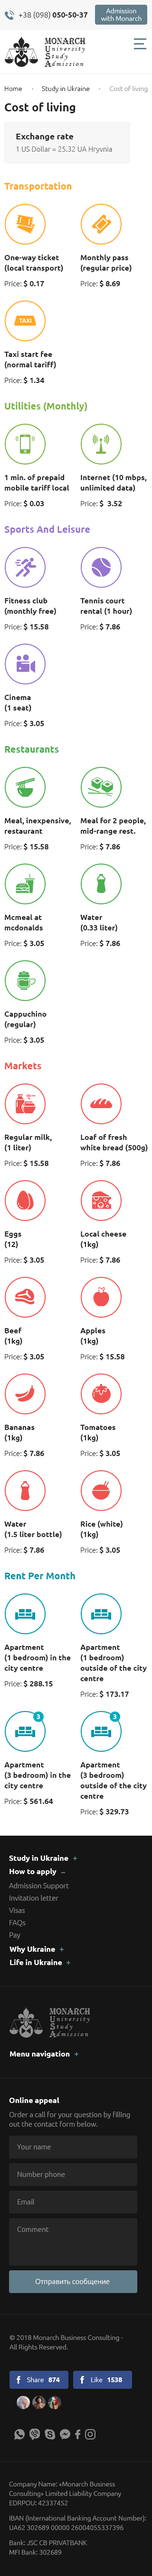
<style>
.page{position:relative;width:152px;height:2576px;background:#ffffff}
.page>*{position:absolute;margin:0}
.t1{font:7.6px "Ubuntu-Light";color:#262028}
.t2{font:7.6px "Ubuntu-Bold";color:#262028}
.t3{font:6.6px/7.6px "Ubuntu-Light";color:#ffffff}
.t4{font:8.8px "Algerian";color:#252525}
.t5{font:7.1px "MonotypeCorsiva";letter-spacing:0.19em;color:#252525}
.t6{font:6.6px "Ubuntu-Light";color:#202020}
.t7{font:6.6px "Ubuntu-Light";color:#909090}
.t8{font:11.4px "Ubuntu-Bold";color:#252525}
.t9{font:7.1px/12.3px "Ubuntu-Light";color:#606060}
.t10{font:8.5px/12.3px "Ubuntu-Bold";color:#252525}
.t11{font:9.5px "Ubuntu-Bold";color:#ffa726}
.t12{font:7.6px/10.4px "Ubuntu-Bold";color:#252525}
.t13{font:7.1px "Ubuntu-Light";color:#252525}
.t14{font:7.6px "Ubuntu-Bold";color:#252525}
.t15{font:9.5px "Ubuntu-Bold";color:#7cb342}
.t16{font:9.5px "Ubuntu-Bold";color:#9575cd}
.t17{font:9.5px "Ubuntu-Bold";color:#4caf50}
.t18{font:9.5px "Ubuntu-Bold";color:#ef5350}
.t19{font:9.5px "Ubuntu-Bold";color:#0097a7}
.t20{font:6.6px "Ubuntu-Bold";color:#ffffff}
.t21{font:7.6px "Ubuntu-Bold";color:#ffffff}
.t22{font:7.1px/12.3px "Ubuntu-Light";color:#909090}
.t23{font:7.6px/9.5px "Ubuntu-Bold";color:#ffffff}
.t24{font:7.1px/14.2px "Ubuntu-Light";color:#909090}
.t25{font:7.1px/9.5px "Ubuntu-Light";color:#909090}
.t26{font:7.1px "Ubuntu-Light";color:#909090}
.t27{font:7.1px "Ubuntu-Light";color:#ffffff}
.t28{font:6.6px/9.5px "Ubuntu-Light";color:#909090}
.t29{font:6.6px "Ubuntu-Light";color:#ffffff}
</style>
<div class="page">
<p class="t1" style="left:18px;top:11px;width:70px;height:8px">+38 (098) <span class="t2">050-50-37</span></p>
<p class="t3" style="left:101px;top:8px;width:40px;height:13px;text-align:center">Admission <br>with Monarch</p>
<p class="t4" style="left:45px;top:38px;width:40px;height:7px">MONARCH</p>
<p class="t4" style="left:45px;top:53px;width:6px;height:6px">S</p>
<p class="t4" style="left:45px;top:46px;width:6px;height:6px">U</p>
<p class="t5" style="left:52px;top:54px;width:16px;height:6px">tudy</p>
<p class="t5" style="left:52px;top:46px;width:33px;height:7px">niversity</p>
<p class="t4" style="left:45px;top:61px;width:7px;height:6px">A</p>
<p class="t5" style="left:52px;top:61px;width:31px;height:5px">dmission</p>
<p class="t6" style="left:5px;top:86px;width:142px;height:6px">Home             Study in Ukraine             <span class="t7">Cost of living</span></p>
<p class="t8" style="left:5px;top:102px;width:70px;height:11px">Cost of living</p>
<p class="t9" style="left:16px;top:133px;width:96px;height:20px"><span class="t10">Exchange rate<br></span>1 US Dollar = 25.32 UA Hryvnia</p>
<p class="t11" style="left:4px;top:182px;width:68px;height:9px">Transportation</p>
<p class="t12" style="left:4px;top:255px;width:59px;height:17px">One-way ticket<br>(local transport)</p>
<p class="t12" style="left:81px;top:255px;width:50px;height:17px">Monthly pass<br>(regular price)</p>
<p class="t13" style="left:5px;top:280px;width:39px;height:7px">Price: <span class="t14">$ 0.17</span></p>
<p class="t13" style="left:81px;top:280px;width:39px;height:7px">Price: <span class="t14">$ 8.69</span></p>
<p class="t12" style="left:4px;top:351px;width:52px;height:18px">Taxi start fee<br>(normal tariff)</p>
<p class="t13" style="left:5px;top:377px;width:39px;height:7px">Price: <span class="t14">$ 1.34</span></p>
<p class="t15" style="left:5px;top:402px;width:82px;height:9px">Utilities (Monthly)</p>
<p class="t12" style="left:81px;top:474px;width:65px;height:18px">Internet (10 mbps,<br>unlimited data)</p>
<p class="t12" style="left:5px;top:474px;width:64px;height:17px">1 min. of prepaid<br>mobile tariff local</p>
<p class="t13" style="left:5px;top:500px;width:39px;height:7px">Price: <span class="t14">$ 0.03</span></p>
<p class="t14" style="left:81px;top:500px;width:41px;height:7px"><span class="t13">Price: </span>$  3.52</p>
<p class="t16" style="left:4px;top:525px;width:86px;height:10px">Sports And Leisure</p>
<p class="t12" style="left:5px;top:598px;width:51px;height:17px">Fitness club<br>(monthly free)</p>
<p class="t12" style="left:80px;top:598px;width:52px;height:17px">Tennis court<br>rental (1 hour)</p>
<p class="t14" style="left:5px;top:623px;width:43px;height:7px"><span class="t13">Price: </span>$ 15.58</p>
<p class="t13" style="left:81px;top:623px;width:39px;height:7px">Price: <span class="t14">$ 7.86</span></p>
<p class="t12" style="left:4px;top:694px;width:27px;height:18px">Cinema<br>(1 seat)</p>
<p class="t13" style="left:5px;top:720px;width:39px;height:7px">Price: <span class="t14">$ 3.05</span></p>
<p class="t17" style="left:5px;top:746px;width:54px;height:7px">Restaurants</p>
<p class="t12" style="left:5px;top:818px;width:66px;height:16px">Meal, inexpensive,<br>restaurant</p>
<p class="t12" style="left:81px;top:818px;width:65px;height:17px">Meal for 2 people,<br>mid-range rest.</p>
<p class="t14" style="left:5px;top:843px;width:43px;height:7px"><span class="t13">Price: </span>$ 15.58</p>
<p class="t13" style="left:81px;top:843px;width:39px;height:7px">Price: <span class="t14">$ 7.86</span></p>
<p class="t12" style="left:5px;top:914px;width:38px;height:16px">Mcmeal at<br>mcdonalds</p>
<p class="t12" style="left:80px;top:915px;width:37px;height:17px">Water<br>(0.33 liter)</p>
<p class="t13" style="left:5px;top:940px;width:39px;height:7px">Price: <span class="t14">$ 3.05</span></p>
<p class="t13" style="left:81px;top:940px;width:39px;height:7px">Price: <span class="t14">$ 7.86</span></p>
<p class="t12" style="left:4px;top:1011px;width:42px;height:18px">Cappuchino<br>(regular)</p>
<p class="t13" style="left:5px;top:1037px;width:39px;height:7px">Price: <span class="t14">$ 3.05</span></p>
<p class="t18" style="left:5px;top:1062px;width:36px;height:7px">Markets</p>
<p class="t12" style="left:5px;top:1134px;width:47px;height:18px">Regular milk,<br>(1 liter)</p>
<p class="t12" style="left:80px;top:1134px;width:67px;height:18px">Loaf of fresh<br>white bread (500g)</p>
<p class="t14" style="left:5px;top:1160px;width:43px;height:7px"><span class="t13">Price: </span>$ 15.58</p>
<p class="t13" style="left:81px;top:1160px;width:39px;height:7px">Price: <span class="t14">$ 7.86</span></p>
<p class="t12" style="left:5px;top:1231px;width:16px;height:17px">Eggs <br>(12)</p>
<p class="t12" style="left:81px;top:1231px;width:45px;height:17px">Local cheese<br>(1kg)</p>
<p class="t13" style="left:5px;top:1256px;width:39px;height:8px">Price: <span class="t14">$ 3.05</span></p>
<p class="t13" style="left:81px;top:1256px;width:39px;height:8px">Price: <span class="t14">$ 7.86</span></p>
<p class="t12" style="left:5px;top:1328px;width:17px;height:17px">Beef<br>(1kg)</p>
<p class="t12" style="left:80px;top:1328px;width:25px;height:17px">Apples<br>(1kg)</p>
<p class="t13" style="left:5px;top:1353px;width:39px;height:7px">Price: <span class="t14">$ 3.05</span></p>
<p class="t14" style="left:81px;top:1353px;width:43px;height:7px"><span class="t13">Price: </span>$ 15.58</p>
<p class="t12" style="left:5px;top:1425px;width:30px;height:17px">Bananas<br>(1kg)</p>
<p class="t12" style="left:80px;top:1425px;width:35px;height:17px">Tomatoes<br>(1kg)</p>
<p class="t13" style="left:5px;top:1450px;width:39px;height:7px">Price: <span class="t14">$ 7.86</span></p>
<p class="t13" style="left:81px;top:1450px;width:39px;height:7px">Price: <span class="t14">$ 3.05</span></p>
<p class="t12" style="left:4px;top:1521px;width:58px;height:17px">Water <br>(1.5 liter bottle)</p>
<p class="t12" style="left:81px;top:1520px;width:41px;height:18px">Rice (white)<br>(1kg)</p>
<p class="t13" style="left:5px;top:1547px;width:39px;height:7px">Price: <span class="t14">$ 7.86</span></p>
<p class="t13" style="left:81px;top:1547px;width:39px;height:7px">Price: <span class="t14">$ 3.05</span></p>
<p class="t19" style="left:5px;top:1572px;width:70px;height:7px">Rent Per Month</p>
<p class="t12" style="left:4px;top:1645px;width:67px;height:27px">Apartment <br>(1 bedroom) in the city centre</p>
<p class="t12" style="left:80px;top:1645px;width:66px;height:36px">Apartment <br>(1 bedroom) <br>outside of the city centre</p>
<p class="t14" style="left:5px;top:1680px;width:48px;height:7px"><span class="t13">Price: </span>$ 288.15</p>
<p class="t14" style="left:81px;top:1691px;width:47px;height:7px"><span class="t13">Price: </span>$ 173.17</p>
<p class="t20" style="left:36px;top:1714px;width:4px;height:5px">3</p>
<p class="t20" style="left:113px;top:1714px;width:4px;height:5px">3</p>
<p class="t12" style="left:4px;top:1762px;width:67px;height:28px">Apartment <br>(3 bedroom) in the city centre</p>
<p class="t12" style="left:80px;top:1762px;width:66px;height:37px">Apartment <br>(3 bedroom) <br>outside of the city centre</p>
<p class="t14" style="left:5px;top:1798px;width:48px;height:7px"><span class="t13">Price: </span>$ 561.64</p>
<p class="t14" style="left:81px;top:1808px;width:47px;height:7px"><span class="t13">Price: </span>$ 329.73</p>
<p class="t21" style="left:9px;top:1855px;width:59px;height:7px">Study in Ukraine</p>
<p class="t22" style="left:9px;top:1868px;width:60px;height:71px"><span class="t23">How to apply<br></span><span class="t24">Admission Support<br></span>Invitation letter<br>Visas<br>FAQs<br>Pay</p>
<p class="t21" style="left:9px;top:1946px;width:46px;height:7px">Why Ukraine</p>
<p class="t21" style="left:10px;top:1959px;width:52px;height:6px">Life in Ukraine</p>
<p class="t21" style="left:10px;top:2051px;width:60px;height:7px">Menu navigation</p>
<p class="t24" style="left:9px;top:2097px;width:121px;height:30px"><span class="t23">Online appeal<br></span>Order a call for your question by filling <br><span class="t25">out the contact form below.</span></p>
<p class="t26" style="left:17px;top:2144px;width:34px;height:5px">Your name</p>
<p class="t26" style="left:18px;top:2171px;width:47px;height:7px">Number phone</p>
<p class="t26" style="left:18px;top:2199px;width:16px;height:5px">Email</p>
<p class="t26" style="left:17px;top:2227px;width:32px;height:5px">Comment</p>
<p class="t27" style="left:35px;top:2278px;width:74px;height:7px">Отправить сообщение</p>
<p class="t28" style="left:9px;top:2335px;width:114px;height:16px">© 2018 Monarch Business Consulting - <br>All Rights Reserved.</p>
<p class="t29" style="left:27px;top:2377px;width:33px;height:5px">Share   <span class="t20">874</span></p>
<p class="t29" style="left:91px;top:2377px;width:31px;height:5px">Like   <span class="t20">1538</span></p>
<p class="t28" style="left:9px;top:2481px;width:112px;height:24px">Company Name: «Monarch Business <br>Consulting» Limited Liability Company <br>EDRPOU: 42337452</p>
<p class="t28" style="left:9px;top:2515px;width:137px;height:15px">IBAN (International Banking Account Number): <br>UA62 302689 00000 26004055337396</p>
<p class="t28" style="left:9px;top:2540px;width:78px;height:15px">Bank: JSC CB PRIVATBANK<br>MFI Bank: 302689</p>
</div>
